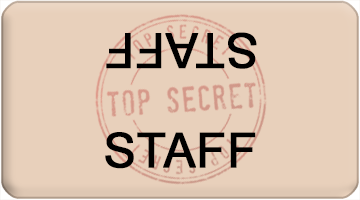
<style>
.page{position:relative;width:360px;height:200px;background:#e8d0bb}
.page>*{position:absolute;margin:0}
.t1{font:48px "ArialMT";color:#000000;font-weight:bold}
</style>
<div class="page">
<p class="t1" style="left:106px;top:32px;width:151px;height:37px;rotate:180deg">STAFF</p>
<p class="t1" style="left:105px;top:132px;width:151px;height:37px">STAFF</p>
</div>
